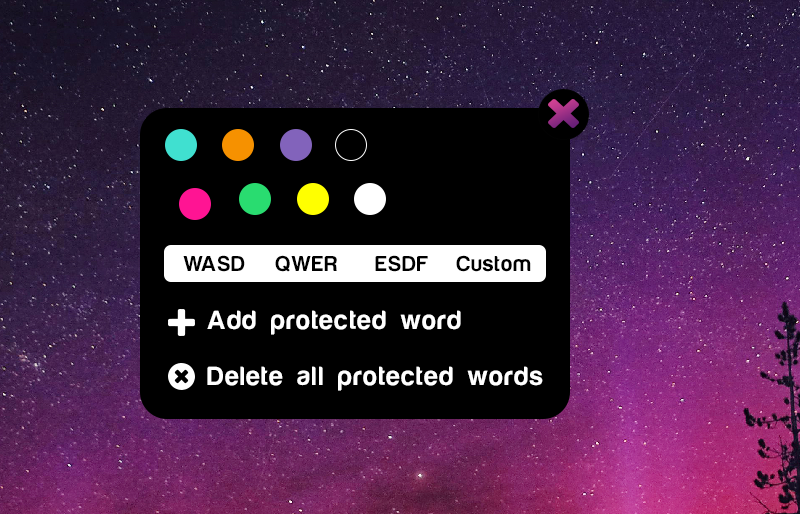
<style>
.page{position:relative;width:800px;height:514px;background:#000000}
.page>*{position:absolute;margin:0}
.t1{font:22px "HarabaraMaisBold-HarabaraMaisBold";letter-spacing:0.02em;color:#000000}
.t2{font:27px "HarabaraMaisBold-HarabaraMaisBold";letter-spacing:0.02em;color:#ffffff}
</style>
<div class="page">
<p class="t1" style="left:183px;top:255px;width:62px;height:17px">WASD</p>
<p class="t1" style="left:275px;top:255px;width:62px;height:17px">QWER</p>
<p class="t1" style="left:375px;top:255px;width:53px;height:17px">ESDF</p>
<p class="t1" style="left:456px;top:255px;width:75px;height:17px">Custom</p>
<p class="t2" style="left:207px;top:310px;width:254px;height:25px">Add protected word</p>
<p class="t2" style="left:207px;top:366px;width:336px;height:25px">Delete all protected words</p>
</div>
